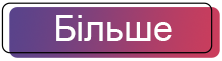
<style>
.page{position:relative;width:222px;height:61px;background:#ffffff}
.page>*{position:absolute;margin:0}
.t1{font:35.8px "ArialMT";color:#ffffff}
</style>
<div class="page">
<p class="t1" style="left:56px;top:15px;width:116px;height:26px">Більше</p>
</div>
